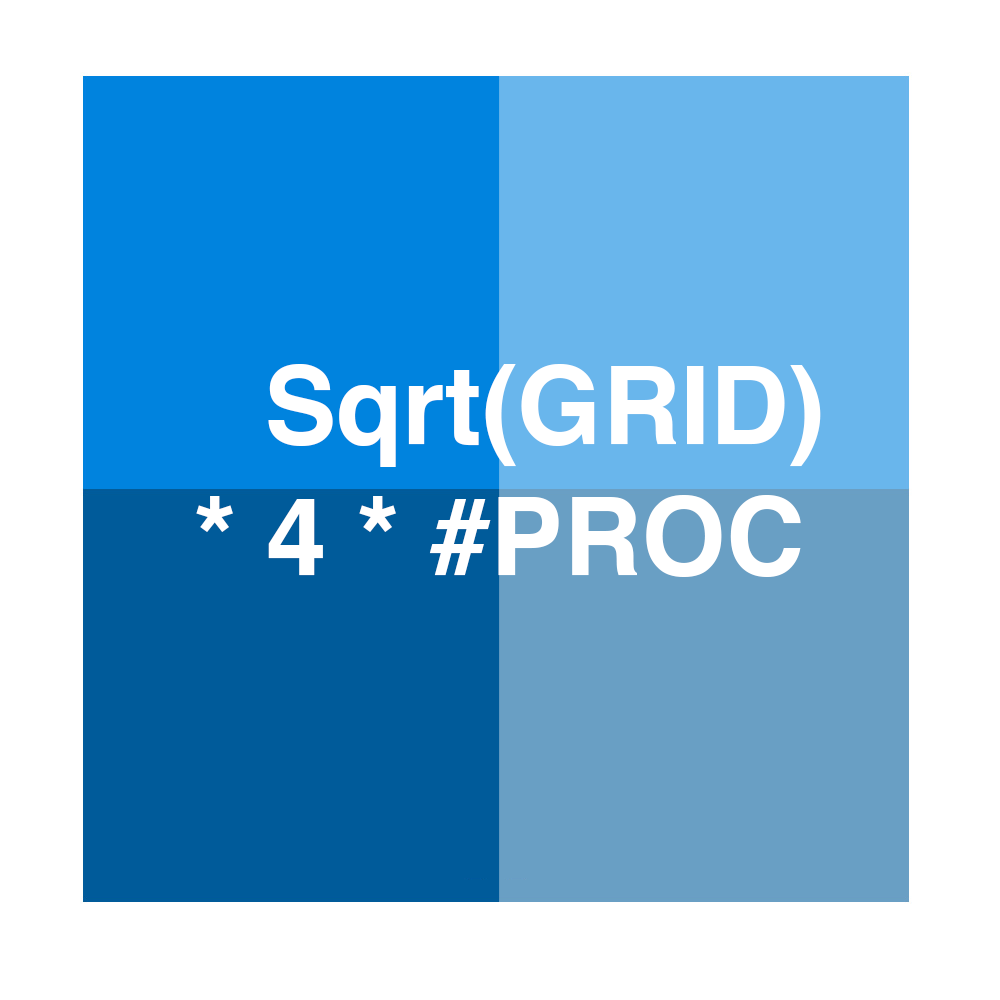
<style>
.page{position:relative;width:1000px;height:1000px;background:#ffffff}
.page>*{position:absolute;margin:0}
.t1{font:108.7px "Helvetica-Bold";color:#ffffff}
</style>
<div class="page">
<p class="t1" style="left:196px;top:364px;width:625px;height:213px;text-align:center">Sqrt(GRID)<br>* 4 * #PROC</p>
</div>
